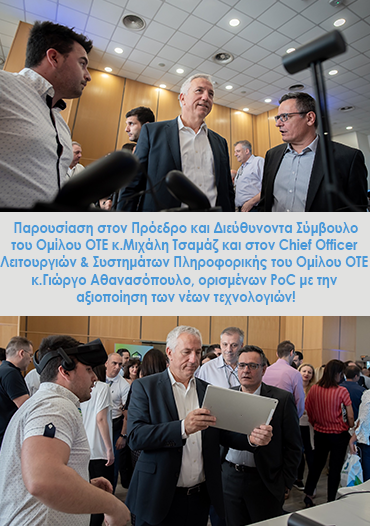
<style>
.page{position:relative;width:370px;height:526px}
.page>*{position:absolute;margin:0}
.t1{font:25.6px/17.3px "CenturyGothic-Bold";color:#4799d9;scale:0.87 1}
</style>
<div class="page">
<p class="t1" style="left:0px;top:221px;width:368px;height:84px;text-align:center">Παρουσίαση στον Πρόεδρο και Διεύθυνοντα Σύμβουλο<br>του Ομίλου ΟΤΕ κ.Μιχάλη Τσαμάζ και στον Chief Officer <br>Λειτουργιών &amp; Συστημάτων Πληροφορικής του Ομίλου ΟΤΕ <br>κ.Γιώργο Αθανασόπουλο, ορισμένων PoC με την <br>αξιοποίηση των νέων τεχνολογιών!</p>
</div>
